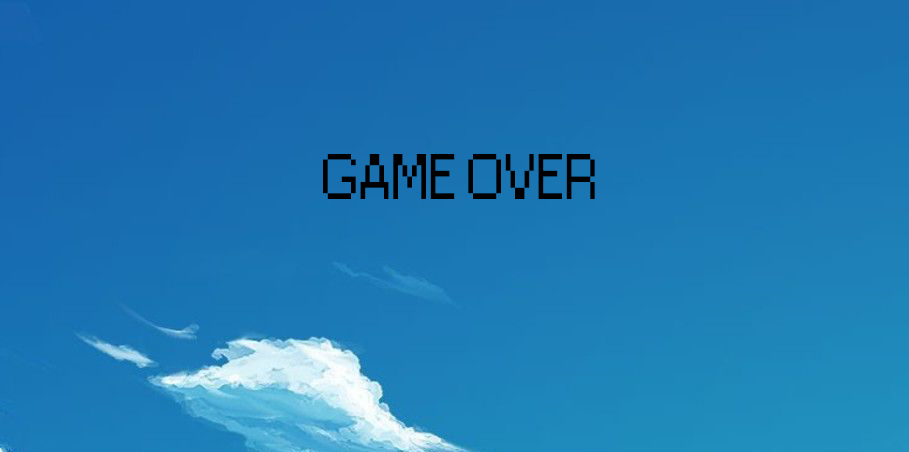
<style>
.page{position:relative;width:909px;height:452px}
.page>*{position:absolute;margin:0}
.t1{font:60px "Small Fonts";color:#000000}
.t2{font:50px "Small Fonts";color:#000000}
</style>
<div class="page">
<p class="t1" style="left:323px;top:154px;width:272px;height:45px"><span class="t2"><br><br></span>GAME OVER</p>
</div>
